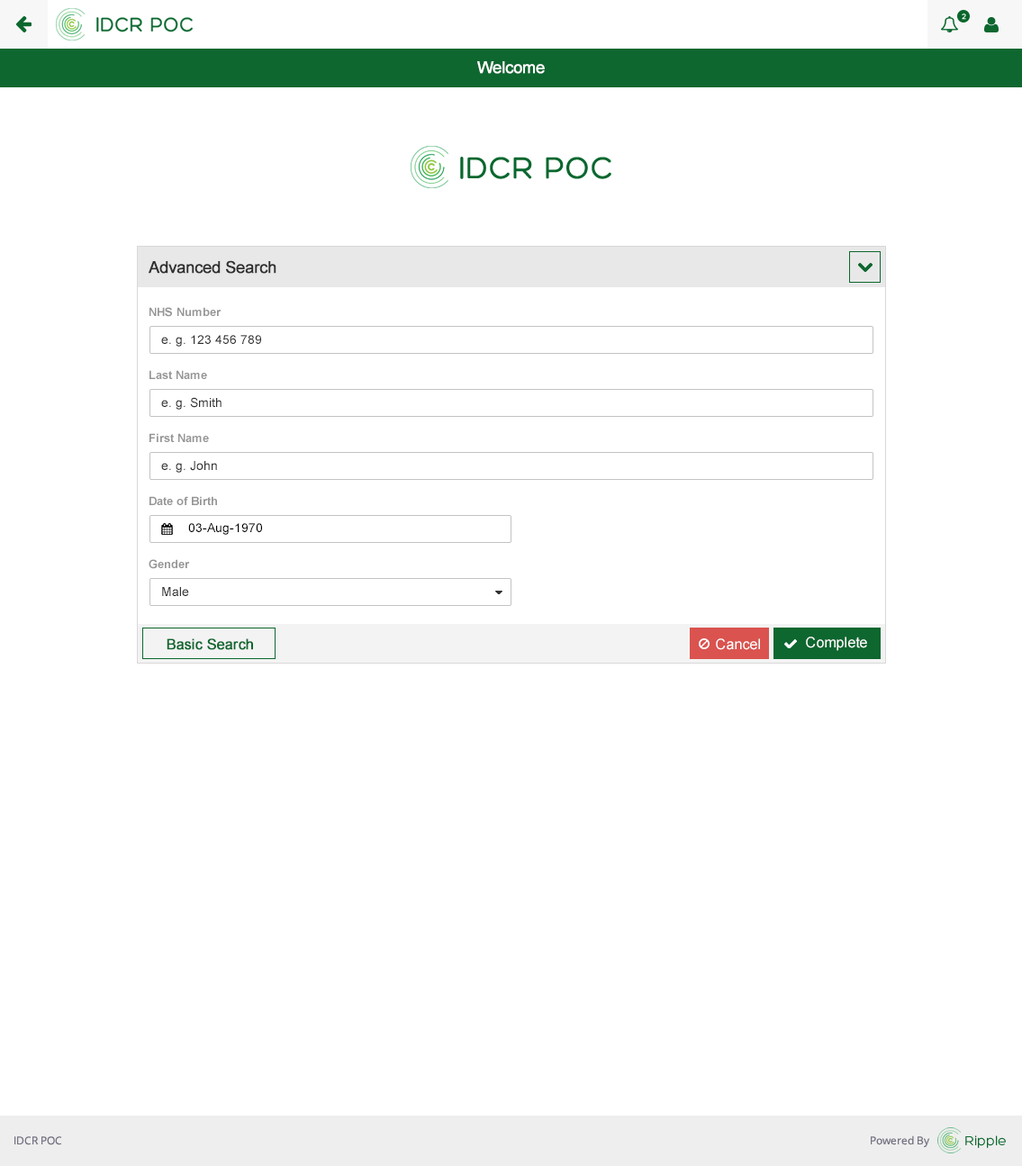
<style>
.page{position:relative;width:1022px;height:1166px;background:#ffffff}
.page>*{position:absolute;margin:0}
.t1{font:16.2px "ArialMT";color:#ffffff;font-weight:bold}
.t2{font:16.2px "ArialMT";color:#303030;font-weight:bold}
.t3{font:11.7px "Arial-BoldMT";color:#959595}
.t4{font:12.6px "ArialMT";color:#303030}
.t5{font:12.6px "ArialMT";color:#000000}
.t6{font:14.4px "ArialMT";color:#0d672f;font-weight:bold}
.t7{font:14.4px "ArialMT";color:#ffffff}
</style>
<div class="page">
<p class="t1" style="left:477px;top:61px;width:68px;height:13px">Welcome</p>
<p class="t2" style="left:149px;top:260px;width:128px;height:14px">Advanced Search</p>
<p class="t3" style="left:150px;top:307px;width:72px;height:10px">NHS Number</p>
<p class="t4" style="left:161px;top:335px;width:100px;height:12px">e. g. 123 456 789</p>
<p class="t3" style="left:150px;top:370px;width:57px;height:9px">Last Name</p>
<p class="t4" style="left:161px;top:397px;width:61px;height:13px">e. g. Smith</p>
<p class="t3" style="left:150px;top:433px;width:59px;height:9px">First Name</p>
<p class="t4" style="left:161px;top:461px;width:56px;height:12px">e. g. John</p>
<p class="t3" style="left:150px;top:496px;width:67px;height:9px">Date of Birth</p>
<p class="t5" style="left:188px;top:523px;width:74px;height:12px">03-Aug-1970</p>
<p class="t3" style="left:149px;top:559px;width:41px;height:10px">Gender</p>
<p class="t4" style="left:162px;top:587px;width:27px;height:9px">Male</p>
<p class="t6" style="left:167px;top:639px;width:86px;height:11px">Basic Search</p>
<p class="t7" style="left:716px;top:639px;width:44px;height:11px">Cancel</p>
<p class="t7" style="left:806px;top:637px;width:61px;height:14px">Complete</p>
</div>
